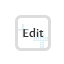
<style>
.page{position:relative;width:64px;height:64px;background:#ffffff}
.page>*{position:absolute;margin:0}
.t1{font:12px "AmiraParadiso";color:#333333}
</style>
<div class="page">
<p class="t1" style="left:23px;top:28px;width:21px;height:9px">Edit</p>
</div>
